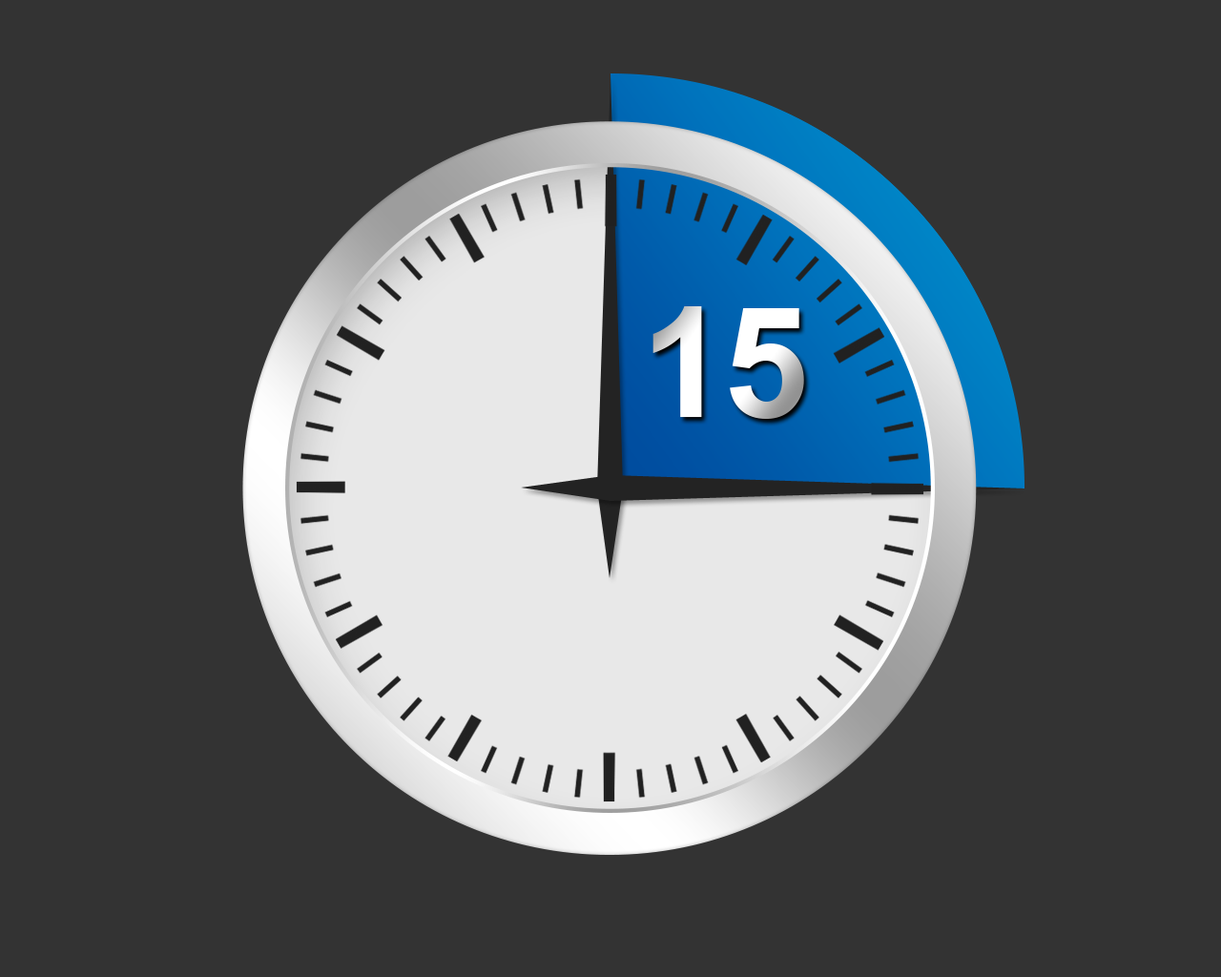
<style>
.page{position:relative;width:1221px;height:977px;background:#333333}
.page>*{position:absolute;margin:0}
.t1{font:153.6px "Arial-BoldMT";letter-spacing:-0.025em;color:#ffffff}
</style>
<div class="page">
<p class="t1" style="left:652px;top:306px;width:152px;height:113px">15</p>
</div>
